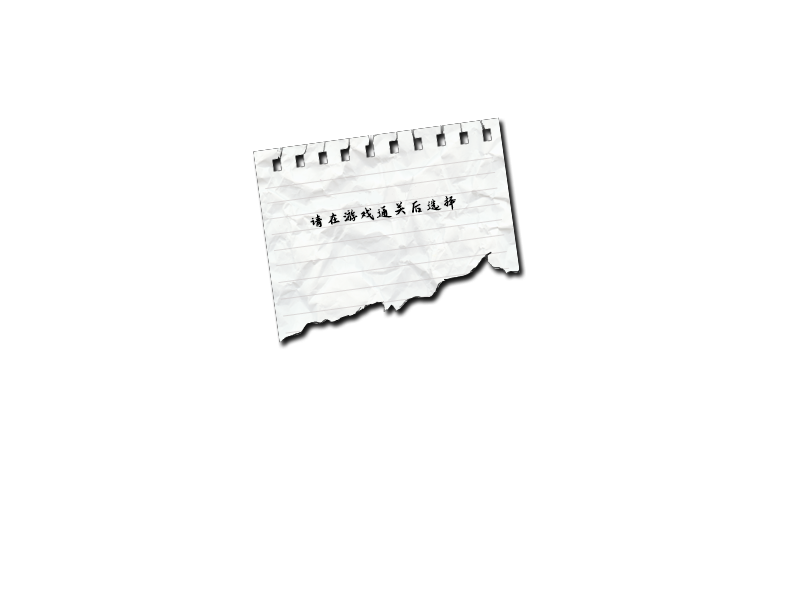
<style>
.page{position:relative;width:800px;height:600px;background:#ffffff}
.page>*{position:absolute;margin:0}
.t1{font:18.8px "slideyouran-Regular";color:#000000}
</style>
<div class="page">
<p class="t1" style="left:310px;top:196px;width:146px;height:32px;rotate:-8deg">请在游戏通关后选择</p>
</div>
